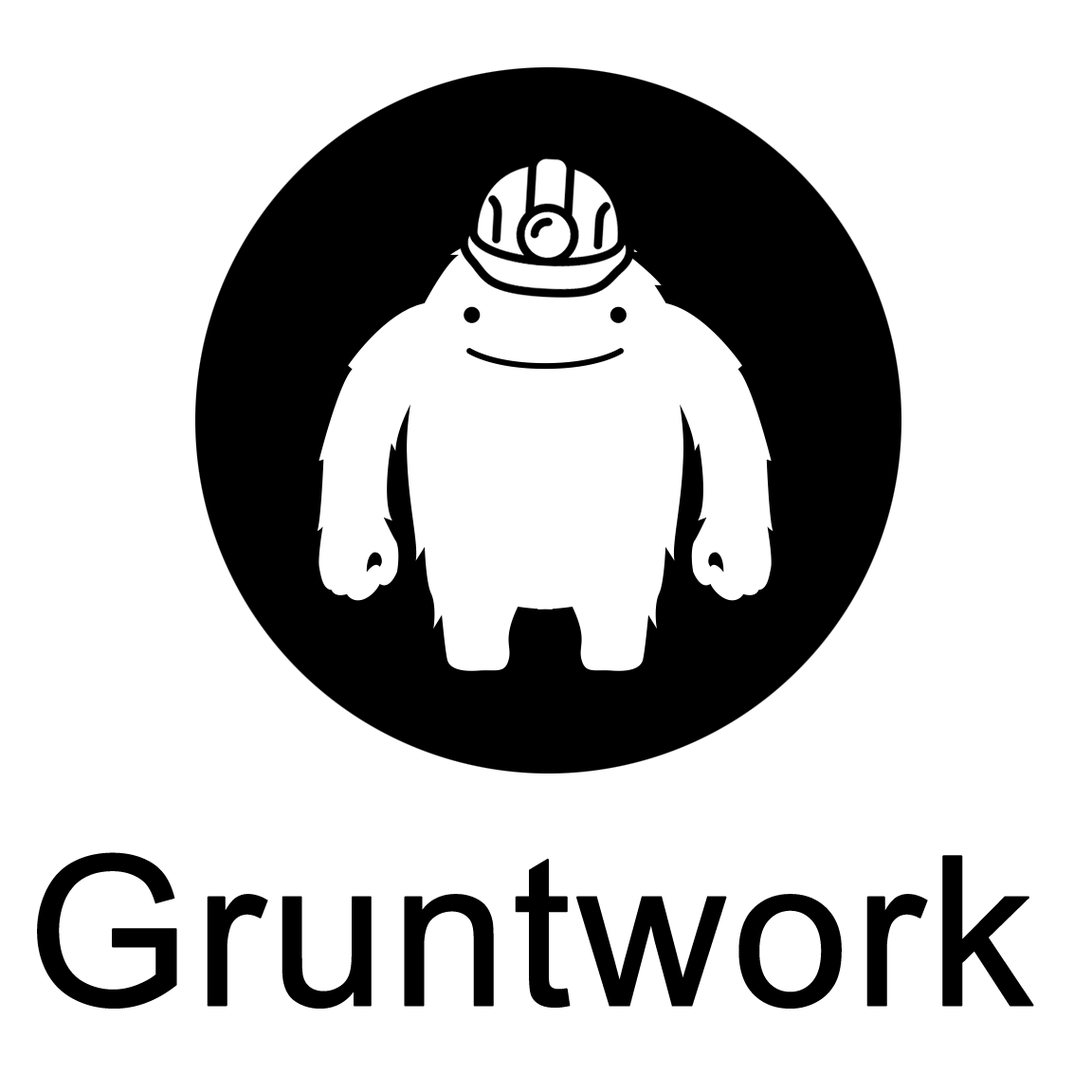
<style>
.page{position:relative;width:1092px;height:1092px;background:#ffffff}
.page>*{position:absolute;margin:0}
.t1{font:208.6px "ArialMT";color:#000000;font-weight:bold}
</style>
<div class="page">
<p class="t1" style="left:37px;top:852px;width:997px;height:157px">Gruntwork</p>
</div>
